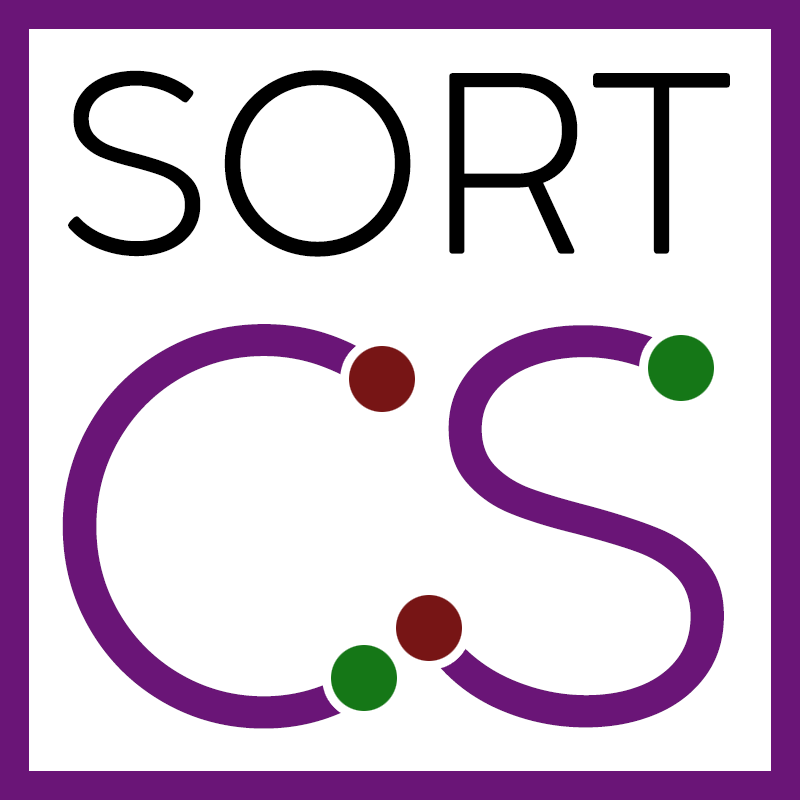
<style>
.page{position:relative;width:800px;height:800px;background:#ffffff}
.page>*{position:absolute;margin:0}
.t1{font:239px "CocogoosePro-Ultralight";color:#000000}
.t2{font:519px "CocogoosePro-Ultralight";color:#6a1577}
</style>
<div class="page">
<p class="t1" style="left:68px;top:70px;width:662px;height:187px">SORT</p>
<p class="t2" style="left:62px;top:324px;width:662px;height:405px">CS</p>
</div>
